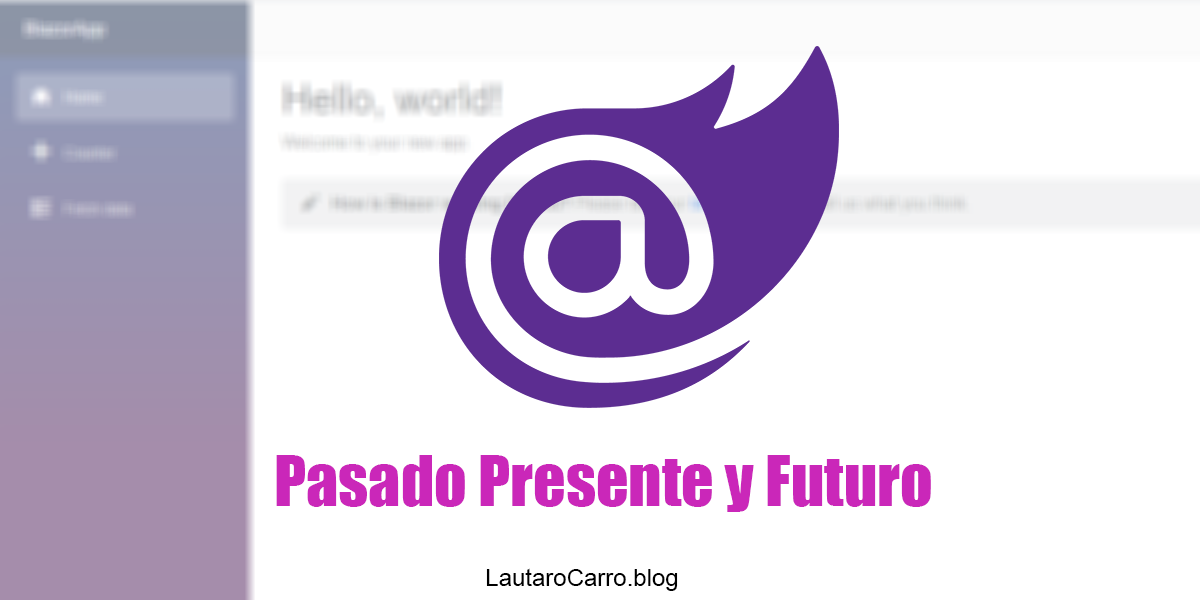
<style>
.page{position:relative;width:1200px;height:600px;background:#ffffff}
.page>*{position:absolute;margin:0}
.t1{font:64px "Impact";color:#ca27b9}
.t2{font:24px "ArialMT";color:#000000}
</style>
<div class="page">
<p class="t1" style="left:276px;top:455px;width:655px;height:57px">Pasado Presente y Futuro</p>
<p class="t2" style="left:486px;top:568px;width:192px;height:23px">LautaroCarro.blog</p>
</div>
